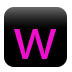
<style>
.page{position:relative;width:72px;height:72px;background:#000000}
.page>*{position:absolute;margin:0}
.t1{font:60px "MyriadPro-Regular";color:#f011ce}
</style>
<div class="page">
<p class="t1" style="left:14px;top:29px;width:43px;height:30px">w</p>
</div>
